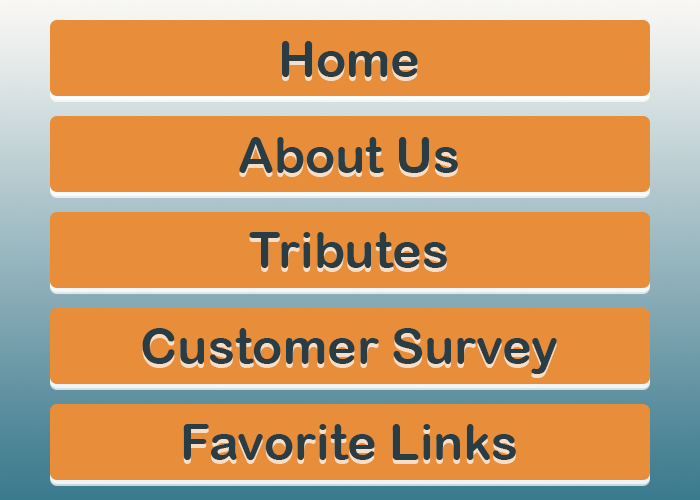
<style>
.page{position:relative;width:700px;height:500px;background:#e88d39}
.page>*{position:absolute;margin:0}
.t1{font:50px "ArialRoundedMTBold";color:#2a3d45}
</style>
<div class="page">
<p class="t1" style="left:282px;top:41px;width:136px;height:36px">Home</p>
<p class="t1" style="left:239px;top:137px;width:219px;height:36px">About Us</p>
<p class="t1" style="left:249px;top:232px;width:198px;height:36px">Tributes</p>
<p class="t1" style="left:142px;top:328px;width:415px;height:46px">Customer Survey</p>
<p class="t1" style="left:183px;top:424px;width:333px;height:36px">Favorite Links</p>
</div>
